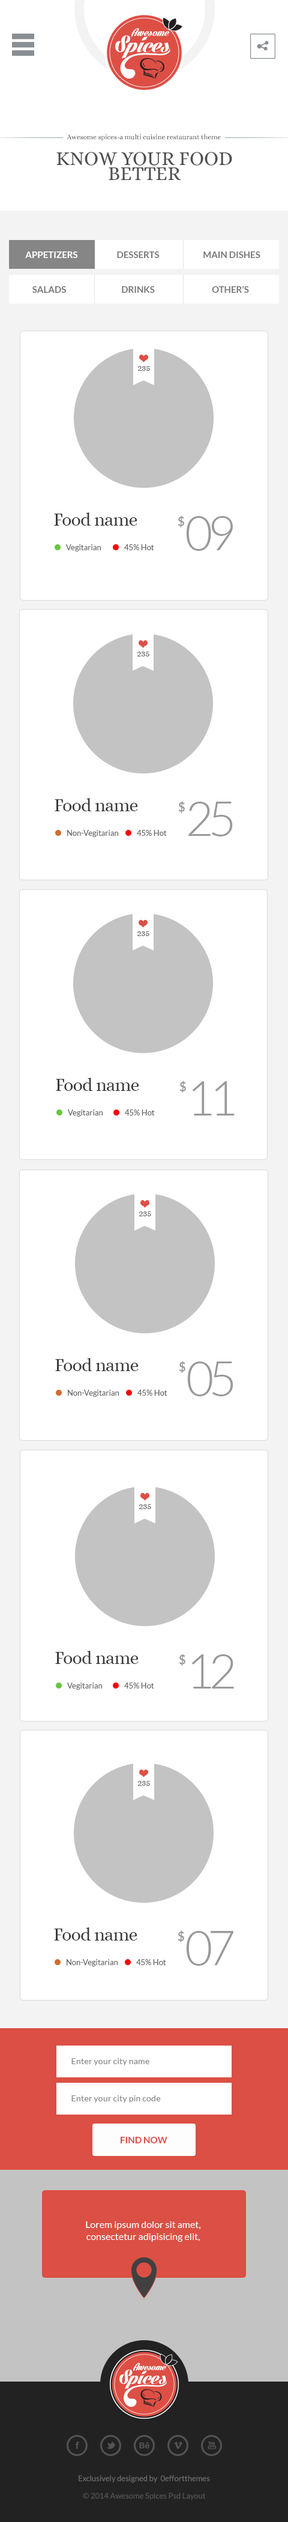
<style>
.page{position:relative;width:288px;height:2522px;background:#ffffff}
.page>*{position:absolute;margin:0}
.t1{font:6.8px "Alice-Regular";color:#505050}
.t2{font:20px/15px "Alice-Regular";color:#505050;text-transform:uppercase}
.t3{font:9px "Lato-Bold";color:#ffffff;text-transform:uppercase}
.t4{font:9px "Lato-Bold";color:#7a7a7a;text-transform:uppercase}
.t5{font:9px "Alice-Regular";letter-spacing:-0.025em;color:#666666}
.t6{font:18px "Alice-Regular";letter-spacing:-0.025em;color:#3a3a3a}
.t7{font:12px "Lato-Bold";letter-spacing:-0.1em;color:#999999}
.t8{font:48px "Lato-Light";letter-spacing:-0.1em;color:#999999}
.t9{font:7.8px "Lato-Regular";color:#666666}
.t10{font:8.6px "Lato-Regular";color:#888888}
.t11{font:9.1px "Lato-Bold";color:#db4f44;text-transform:uppercase}
.t12{font:9.6px/12px "Lato-Regular";color:#ffffff}
.t13{font:7.8px "Lato-Regular";color:#737373}
.t14{font:7.8px "Lato-Regular";color:#5a5a5a}
</style>
<div class="page">
<p class="t1" style="left:67px;top:134px;width:154px;height:7px">Awesome spices-a multi cuisine restaurant theme</p>
<p class="t2" style="left:56px;top:152px;width:176px;height:28px;text-align:center">Know your food<br>better</p>
<p class="t3" style="left:25px;top:251px;width:53px;height:7px">Appetizers</p>
<p class="t4" style="left:117px;top:251px;width:43px;height:7px">Desserts</p>
<p class="t4" style="left:203px;top:251px;width:57px;height:7px">Main Dishes</p>
<p class="t4" style="left:32px;top:286px;width:34px;height:7px">Salads</p>
<p class="t4" style="left:122px;top:286px;width:33px;height:7px">Drinks</p>
<p class="t4" style="left:212px;top:286px;width:37px;height:7px">other’s</p>
<p class="t5" style="left:137px;top:366px;width:13px;height:5px">235</p>
<p class="t6" style="left:54px;top:512px;width:83px;height:14px">Food name</p>
<p class="t7" style="left:178px;top:515px;width:6px;height:12px">$</p>
<p class="t8" style="left:186px;top:516px;width:47px;height:35px">09</p>
<p class="t9" style="left:66px;top:544px;width:35px;height:7px">Vegitarian</p>
<p class="t9" style="left:124px;top:544px;width:30px;height:6px">45% Hot</p>
<p class="t5" style="left:137px;top:652px;width:12px;height:4px">235</p>
<p class="t6" style="left:55px;top:798px;width:83px;height:13px">Food name</p>
<p class="t7" style="left:178px;top:801px;width:7px;height:12px">$</p>
<p class="t8" style="left:188px;top:802px;width:45px;height:34px">25</p>
<p class="t9" style="left:67px;top:830px;width:51px;height:7px">Non-Vegitarian</p>
<p class="t9" style="left:137px;top:830px;width:30px;height:6px">45% Hot</p>
<p class="t5" style="left:137px;top:931px;width:12px;height:5px">235</p>
<p class="t6" style="left:56px;top:1078px;width:83px;height:13px">Food name</p>
<p class="t7" style="left:179px;top:1081px;width:7px;height:12px">$</p>
<p class="t8" style="left:192px;top:1081px;width:43px;height:34px">11</p>
<p class="t9" style="left:68px;top:1109px;width:35px;height:8px">Vegitarian</p>
<p class="t9" style="left:125px;top:1109px;width:30px;height:6px">45% Hot</p>
<p class="t5" style="left:139px;top:1211px;width:12px;height:5px">235</p>
<p class="t6" style="left:55px;top:1358px;width:84px;height:13px">Food name</p>
<p class="t7" style="left:179px;top:1361px;width:6px;height:12px">$</p>
<p class="t8" style="left:187px;top:1361px;width:46px;height:35px">05</p>
<p class="t9" style="left:68px;top:1390px;width:51px;height:7px">Non-Vegitarian</p>
<p class="t9" style="left:137px;top:1390px;width:30px;height:6px">45% Hot</p>
<p class="t5" style="left:139px;top:1504px;width:12px;height:5px">235</p>
<p class="t6" style="left:55px;top:1651px;width:84px;height:13px">Food name</p>
<p class="t7" style="left:179px;top:1654px;width:6px;height:12px">$</p>
<p class="t8" style="left:191px;top:1654px;width:43px;height:34px">12</p>
<p class="t9" style="left:67px;top:1682px;width:35px;height:8px">Vegitarian</p>
<p class="t9" style="left:124px;top:1682px;width:30px;height:6px">45% Hot</p>
<p class="t5" style="left:137px;top:1781px;width:13px;height:5px">235</p>
<p class="t6" style="left:54px;top:1927px;width:83px;height:13px">Food name</p>
<p class="t7" style="left:178px;top:1930px;width:6px;height:12px">$</p>
<p class="t8" style="left:186px;top:1931px;width:47px;height:35px">07</p>
<p class="t9" style="left:67px;top:1959px;width:51px;height:7px">Non-Vegitarian</p>
<p class="t9" style="left:136px;top:1959px;width:30px;height:6px">45% Hot</p>
<p class="t10" style="left:71px;top:2058px;width:78px;height:7px">Enter your city name</p>
<p class="t10" style="left:71px;top:2095px;width:90px;height:7px">Enter your city pin code</p>
<p class="t11" style="left:121px;top:2137px;width:46px;height:6px">find Now</p>
<p class="t12" style="left:86px;top:2221px;width:114px;height:21px;text-align:center">Lorem ipsum dolor sit amet, consectetur adipisicing elit,</p>
<p class="t13" style="left:79px;top:2475px;width:131px;height:8px">Exclusively designed by  0effortthemes</p>
<p class="t14" style="left:83px;top:2492px;width:123px;height:8px">© 2014 Awesome Spices Psd Layout</p>
</div>
